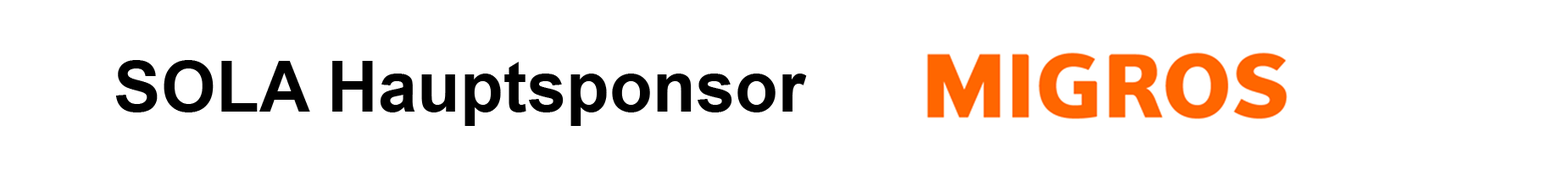
<style>
.page{position:relative;width:1568px;height:175px;background:#ffffff}
.page>*{position:absolute;margin:0}
.t1{font:70.6px "Arial-BoldMT";color:#000000}
</style>
<div class="page">
<p class="t1" style="left:116px;top:60px;width:691px;height:66px">SOLA Hauptsponsor</p>
</div>
